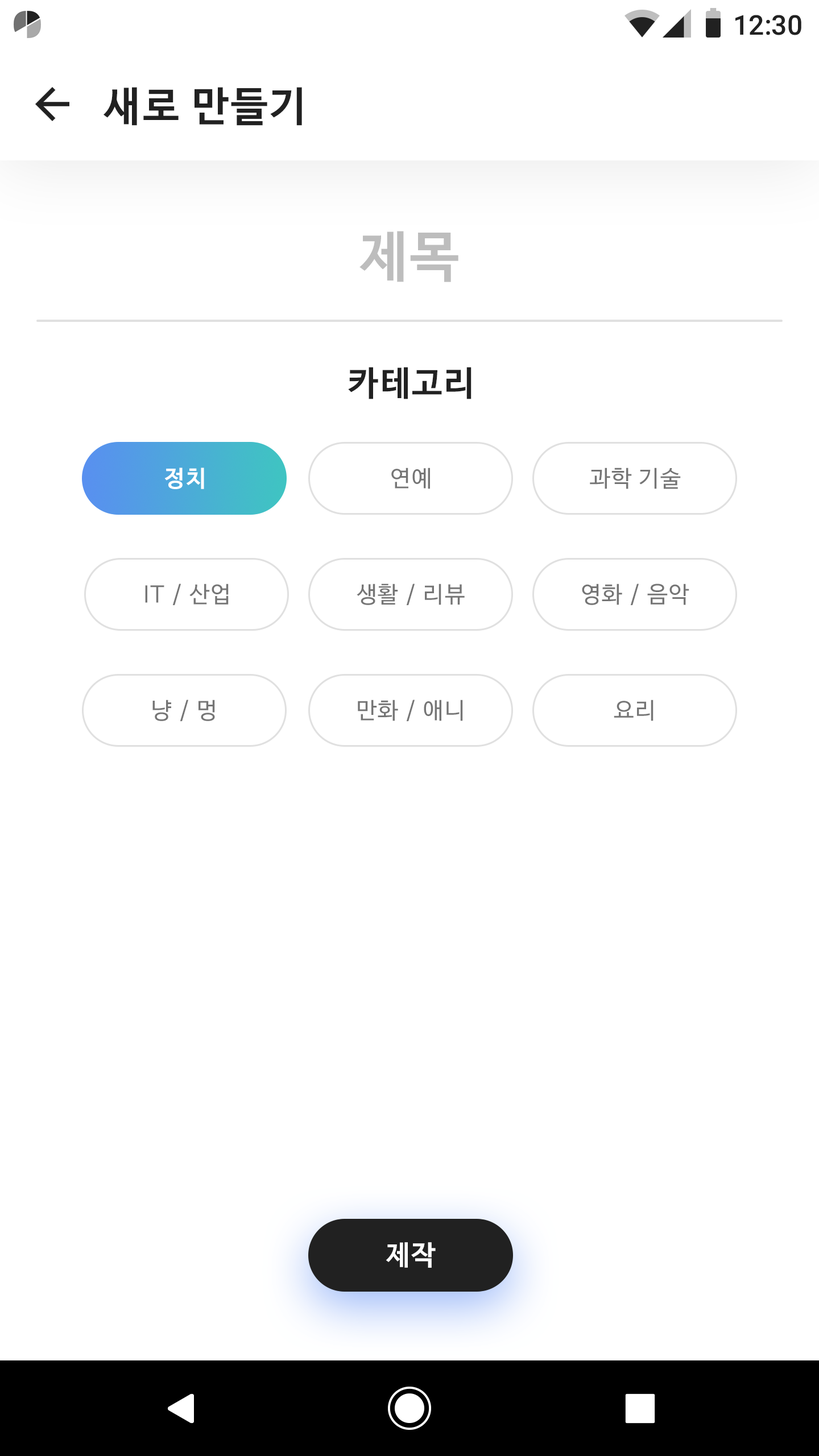
<style>
.page{position:relative;width:819px;height:1456px;background:#ffffff}
.page>*{position:absolute;margin:0}
.t1{font:27.3px "Roboto-Medium";color:#212121}
.t2{font:40.9px "NanumBarunGothicBold";letter-spacing:0.05em;color:#212121}
.t3{font:54.6px "NanumBarunGothicBold";letter-spacing:0.05em;color:#bdbdbd}
.t4{font:34.1px "NanumBarunGothicBold";letter-spacing:0.05em;color:#212121}
.t5{font:22.7px "NanumBarunGothicBold";letter-spacing:0.05em;color:#ffffff}
.t6{font:22.7px "NanumBarunGothic";letter-spacing:0.05em;color:#757575}
.t7{font:27.3px "NanumBarunGothicBold";letter-spacing:0.05em;color:#ffffff}
</style>
<div class="page">
<p class="t1" style="left:735px;top:15px;width:66px;height:20px">12:30</p>
<p class="t2" style="left:104px;top:87px;width:198px;height:39px">새로 만들기</p>
<p class="t3" style="left:359px;top:231px;width:99px;height:51px">제목</p>
<p class="t4" style="left:348px;top:367px;width:123px;height:32px">카테고리</p>
<p class="t5" style="left:164px;top:468px;width:40px;height:21px">정치</p>
<p class="t6" style="left:391px;top:468px;width:39px;height:21px">연예</p>
<p class="t6" style="left:590px;top:468px;width:91px;height:21px">과학 기술</p>
<p class="t6" style="left:145px;top:584px;width:84px;height:21px">IT / 산업</p>
<p class="t6" style="left:357px;top:584px;width:108px;height:21px">생활 / 리뷰</p>
<p class="t6" style="left:582px;top:584px;width:107px;height:21px">영화 / 음악</p>
<p class="t6" style="left:152px;top:700px;width:63px;height:21px">냥 / 멍</p>
<p class="t6" style="left:358px;top:700px;width:105px;height:21px">만화 / 애니</p>
<p class="t6" style="left:614px;top:700px;width:39px;height:21px">요리</p>
<p class="t7" style="left:386px;top:1242px;width:50px;height:26px">제작</p>
</div>
